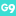
<style>
.page{position:relative;width:16px;height:16px;background:#3bded4}
.page>*{position:absolute;margin:0}
.t1{font:11px "TwCenMT-Bold";color:#fefefe}
.t2{font:14px "TwCenMT-Bold";color:#fefefe}
</style>
<div class="page">
<p class="t1" style="left:1px;top:3px;width:7px;height:9px">G</p>
<p class="t2" style="left:8px;top:4px;width:7px;height:9px">9</p>
</div>
